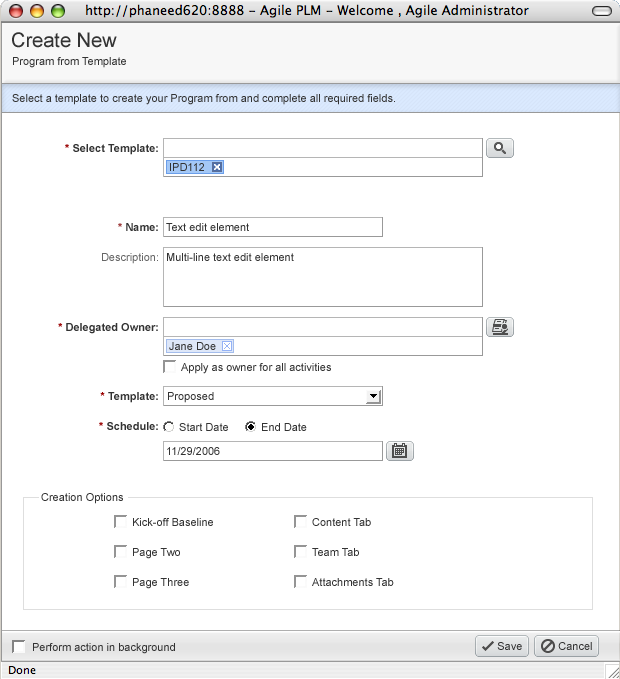
<style>
.page{position:relative;width:620px;height:679px;background:#ffffff}
.page>*{position:absolute;margin:0}
.t1{font:20px "ArialMT";color:#333333}
.t2{font:11px "ArialMT";color:#333333}
.t3{font:11px "Arial-BoldMT";color:#333333}
.t4{font:11px "Arial-BoldMT";color:#990000}
.t5{font:11px "Arial-BoldMT";color:#993333}
.t6{font:11px "ArialMT";color:#666666}
.t7{font:11px "Arial-BoldMT";color:#666666}
</style>
<div class="page">
<p class="t1" style="left:12px;top:32px;width:105px;height:16px">Create New</p>
<p class="t2" style="left:13px;top:57px;width:113px;height:11px">Program from Template</p>
<p class="t2" style="left:12px;top:94px;width:383px;height:11px">Select a template to create your Program from and complete all required fields.</p>
<p class="t3" style="left:65px;top:144px;width:93px;height:11px"><span class="t4">*</span> Select Template:</p>
<p class="t2" style="left:170px;top:163px;width:34px;height:8px">IPD112</p>
<p class="t3" style="left:118px;top:223px;width:40px;height:8px"><span class="t5">*</span> Name:</p>
<p class="t2" style="left:166px;top:223px;width:83px;height:8px">Text edit element</p>
<p class="t6" style="left:102px;top:253px;width:56px;height:11px">Description:</p>
<p class="t2" style="left:167px;top:253px;width:127px;height:8px">Multi-line text edit element</p>
<p class="t3" style="left:58px;top:323px;width:100px;height:11px"><span class="t4">*</span> Delegated Owner:</p>
<p class="t2" style="left:181px;top:363px;width:150px;height:11px">Apply as owner for all activities</p>
<p class="t3" style="left:100px;top:392px;width:58px;height:11px"><span class="t7"> </span><span class="t4">* </span>Template:</p>
<p class="t2" style="left:168px;top:392px;width:46px;height:11px">Proposed</p>
<p class="t3" style="left:99px;top:422px;width:59px;height:8px"><span class="t4">*</span> Schedule:</p>
<p class="t2" style="left:179px;top:423px;width:49px;height:8px"><span class="t6"> </span>Start Date</p>
<p class="t2" style="left:262px;top:423px;width:45px;height:8px"><span class="t6"> </span>End Date</p>
<p class="t2" style="left:167px;top:447px;width:53px;height:8px">11/29/2006</p>
<p class="t2" style="left:41px;top:493px;width:82px;height:11px">Creation Options</p>
<p class="t2" style="left:133px;top:518px;width:80px;height:8px">Kick-off Baseline</p>
<p class="t2" style="left:312px;top:518px;width:59px;height:8px">Content Tab</p>
<p class="t2" style="left:133px;top:548px;width:47px;height:11px">Page Two</p>
<p class="t2" style="left:312px;top:548px;width:47px;height:8px">Team Tab</p>
<p class="t2" style="left:133px;top:578px;width:56px;height:11px">Page Three</p>
<p class="t2" style="left:312px;top:578px;width:82px;height:8px">Attachments Tab</p>
<p class="t2" style="left:33px;top:643px;width:142px;height:11px">Perform action in background</p>
<p class="t2" style="left:497px;top:642px;width:25px;height:8px">Save</p>
<p class="t2" style="left:558px;top:642px;width:34px;height:8px">Cancel</p>
</div>
